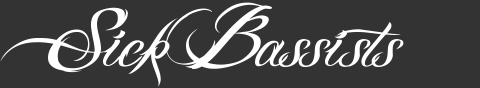
<style>
.page{position:relative;width:480px;height:88px;background:#333333}
.page>*{position:absolute;margin:0}
.t1{font:127px "BILLYARGELFONT";color:#ffffff}
</style>
<div class="page">
<p class="t1" style="left:0px;top:2px;width:404px;height:85px">Sick Bassists</p>
</div>
